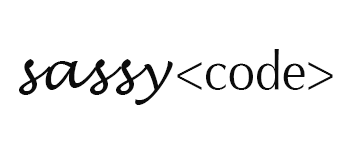
<style>
.page{position:relative;width:350px;height:150px;background:#ffffff}
.page>*{position:absolute;margin:0}
.t1{font:54.7px "Optima-Regular";color:#0b0b0b;scale:0.88 1}
.t2{font:55px "LucidaHandwriting-Italic";letter-spacing:0.04em;color:#0b0b0b}
</style>
<div class="page">
<p class="t1" style="left:177px;top:49px;width:156px;height:41px">&lt;code&gt;</p>
<p class="t2" style="left:19px;top:59px;width:154px;height:46px">sassy</p>
</div>
